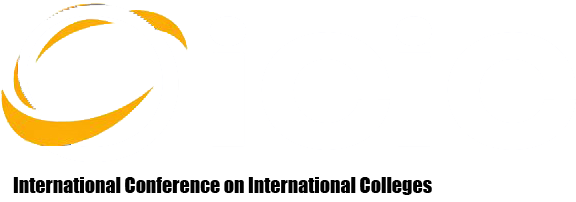
<style>
.page{position:relative;width:576px;height:202px;background:#ffffff}
.page>*{position:absolute;margin:0}
.t1{font:20px "Impact";color:#000000}
</style>
<div class="page">
<p class="t1" style="left:13px;top:177px;width:419px;height:18px">International Conference on International Colleges</p>
</div>
